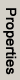
<style>
.page{position:relative;width:20px;height:80px;background:#d4d0c8}
.page>*{position:absolute;margin:0}
.t1{font:14px "ArialMT";color:#000000;font-weight:bold}
</style>
<div class="page">
<p class="t1" style="left:3px;top:8px;width:14px;height:67px;rotate:90deg">Properties</p>
</div>
